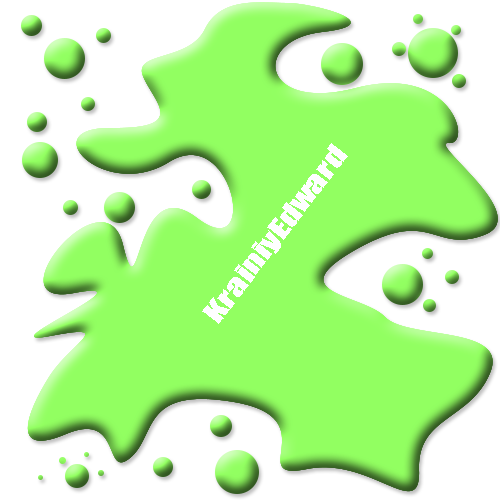
<style>
.page{position:relative;width:500px;height:500px;background:#ffffff}
.page>*{position:absolute;margin:0}
.t1{font:26.7px "Impact";color:#ffffff;scale:1.35 1}
</style>
<div class="page">
<p class="t1" style="left:202px;top:143px;width:146px;height:181px;rotate:-52deg">KrainiyEdward</p>
</div>
